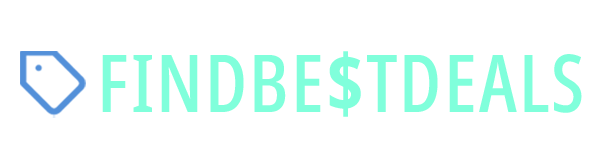
<style>
.page{position:relative;width:608px;height:168px;background:#ffffff}
.page>*{position:absolute;margin:0}
.t1{font:80px "NotoSansNFP-ExtCondMed";letter-spacing:0.025em;color:#80ffdb}
.t2{font:80px "NotoSansNFP-ExtCondExtBd";letter-spacing:0.025em;color:#80ffdb}
</style>
<div class="page">
<p class="t1" style="left:102px;top:51px;width:480px;height:66px">FINDBE<span class="t2">$</span>TDEALS</p>
</div>
